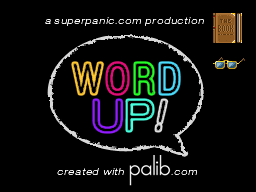
<style>
.page{position:relative;width:256px;height:192px;background:#000000}
.page>*{position:absolute;margin:0}
.t1{font:9px "HelveticaNeue-ThinExtObl";letter-spacing:0.14em;color:#ffffff}
</style>
<div class="page">
<p class="t1" style="left:45px;top:17px;width:159px;height:9px">a superpanic.com production</p>
<p class="t1" style="left:57px;top:168px;width:67px;height:7px">created with</p>
<p class="t1" style="left:171px;top:170px;width:26px;height:5px">.com</p>
</div>
